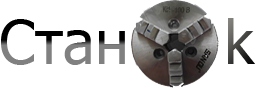
<style>
.page{position:relative;width:264px;height:88px;background:#ffffff}
.page>*{position:absolute;margin:0}
.t1{font:60px "Tahoma"}
</style>
<div class="page">
<p class="t1" style="left:1px;top:19px;width:124px;height:46px">Стан</p>
<p class="t1" style="left:228px;top:18px;width:27px;height:46px">k</p>
</div>
